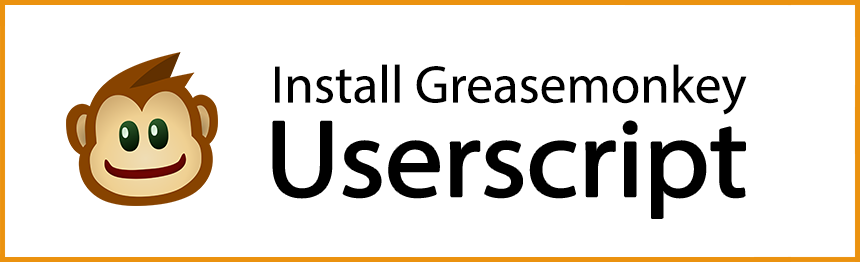
<style>
.page{position:relative;width:860px;height:262px;background:#ffffff}
.page>*{position:absolute;margin:0}
.t1{font:53.3px "MyriadPro-Regular";color:#000000}
.t2{font:110.2px "MyriadPro-Regular";color:#000000;scale:1.05 1}
</style>
<div class="page">
<p class="t1" style="left:275px;top:64px;width:472px;height:51px">Install Greasemonkey</p>
<p class="t2" style="left:273px;top:121px;width:472px;height:97px">Userscript</p>
</div>
